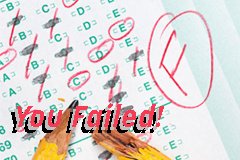
<style>
.page{position:relative;width:240px;height:160px}
.page>*{position:absolute;margin:0}
.t1{font:30px "Korolev-BoldItalic";letter-spacing:0.05em}
.t2{font:30px "Korolev-BoldItalic";letter-spacing:0.05em;color:#f63c52}
</style>
<div class="page">
<p class="t1" style="left:11px;top:109px;width:147px;height:24px">You Failed!</p>
<p class="t2" style="left:17px;top:103px;width:147px;height:24px">You Failed!</p>
</div>
